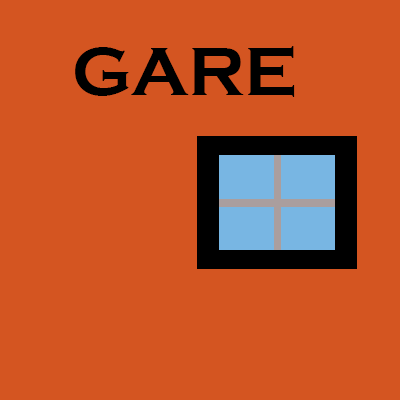
<style>
.page{position:relative;width:400px;height:400px;background:#d45521}
.page>*{position:absolute;margin:0}
.t1{font:70px "CopperplateGothic-Bold";color:#000000}
</style>
<div class="page">
<p class="t1" style="left:75px;top:46px;width:220px;height:51px">GARE</p>
</div>
